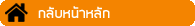
<style>
.page{position:relative;width:195px;height:26px;background:#f48400}
.page>*{position:absolute;margin:0}
.t1{font:16px "SuperspaceBold";color:#ffffff}
</style>
<div class="page">
<p class="t1" style="left:38px;top:6px;width:72px;height:12px">กลับหน้าหลัก</p>
</div>
